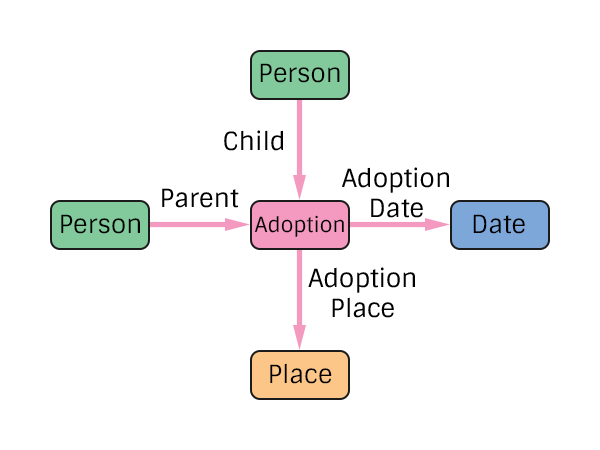
<style>
.page{position:relative;width:600px;height:450px;background:#ffffff}
.page>*{position:absolute;margin:0}
.t1{font:25px "Sintony";color:#000000}
.t2{font:20.8px "Sintony";color:#000000}
</style>
<div class="page">
<p class="t1" style="left:260px;top:63px;width:80px;height:20px">Person</p>
<p class="t1" style="left:224px;top:130px;width:59px;height:21px">Child</p>
<p class="t1" style="left:342px;top:167px;width:107px;height:51px;text-align:center">Adoption<br>Date</p>
<p class="t1" style="left:162px;top:188px;width:77px;height:20px">Parent</p>
<p class="t1" style="left:61px;top:214px;width:79px;height:20px">Person</p>
<p class="t2" style="left:254px;top:215px;width:90px;height:22px">Adoption</p>
<p class="t1" style="left:473px;top:214px;width:52px;height:20px">Date</p>
<p class="t1" style="left:308px;top:267px;width:107px;height:51px;text-align:center">Adoption<br>Place</p>
<p class="t1" style="left:270px;top:363px;width:62px;height:21px">Place</p>
</div>
